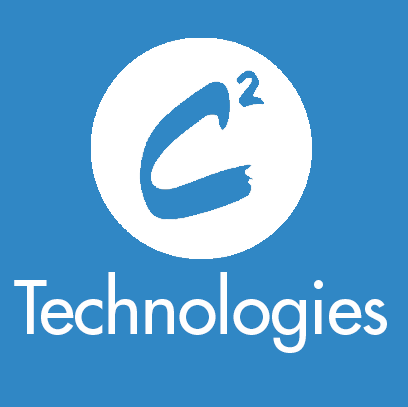
<style>
.page{position:relative;width:408px;height:407px;background:#3087c5}
.page>*{position:absolute;margin:0}
.t1{font:72px "Futura";letter-spacing:-0.01em;color:#fefefe}
</style>
<div class="page">
<p class="t1" style="left:14px;top:272px;width:373px;height:81px">Technologies</p>
</div>
